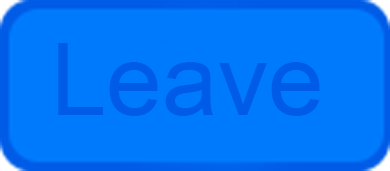
<style>
.page{position:relative;width:390px;height:171px;background:#007afc}
.page>*{position:absolute;margin:0}
.t1{font:100px "ArialMT";color:#005ce7}
</style>
<div class="page">
<p class="t1" style="left:58px;top:43px;width:262px;height:73px">Leave</p>
</div>
